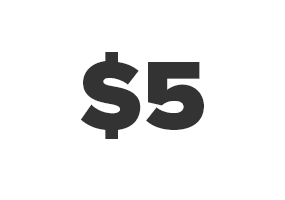
<style>
.page{position:relative;width:285px;height:200px;background:#ffffff}
.page>*{position:absolute;margin:0}
.t1{font:100px "ProximaNova-Black";color:#333333}
</style>
<div class="page">
<p class="t1" style="left:80px;top:52px;width:124px;height:87px">$5</p>
</div>
